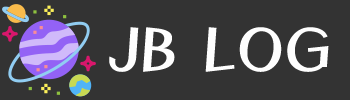
<style>
.page{position:relative;width:350px;height:100px;background:#333333}
.page>*{position:absolute;margin:0}
.t1{font:65px "MagicR-HM";color:#fefefe}
</style>
<div class="page">
<p class="t1" style="left:109px;top:27px;width:220px;height:45px">JB LOG</p>
</div>
